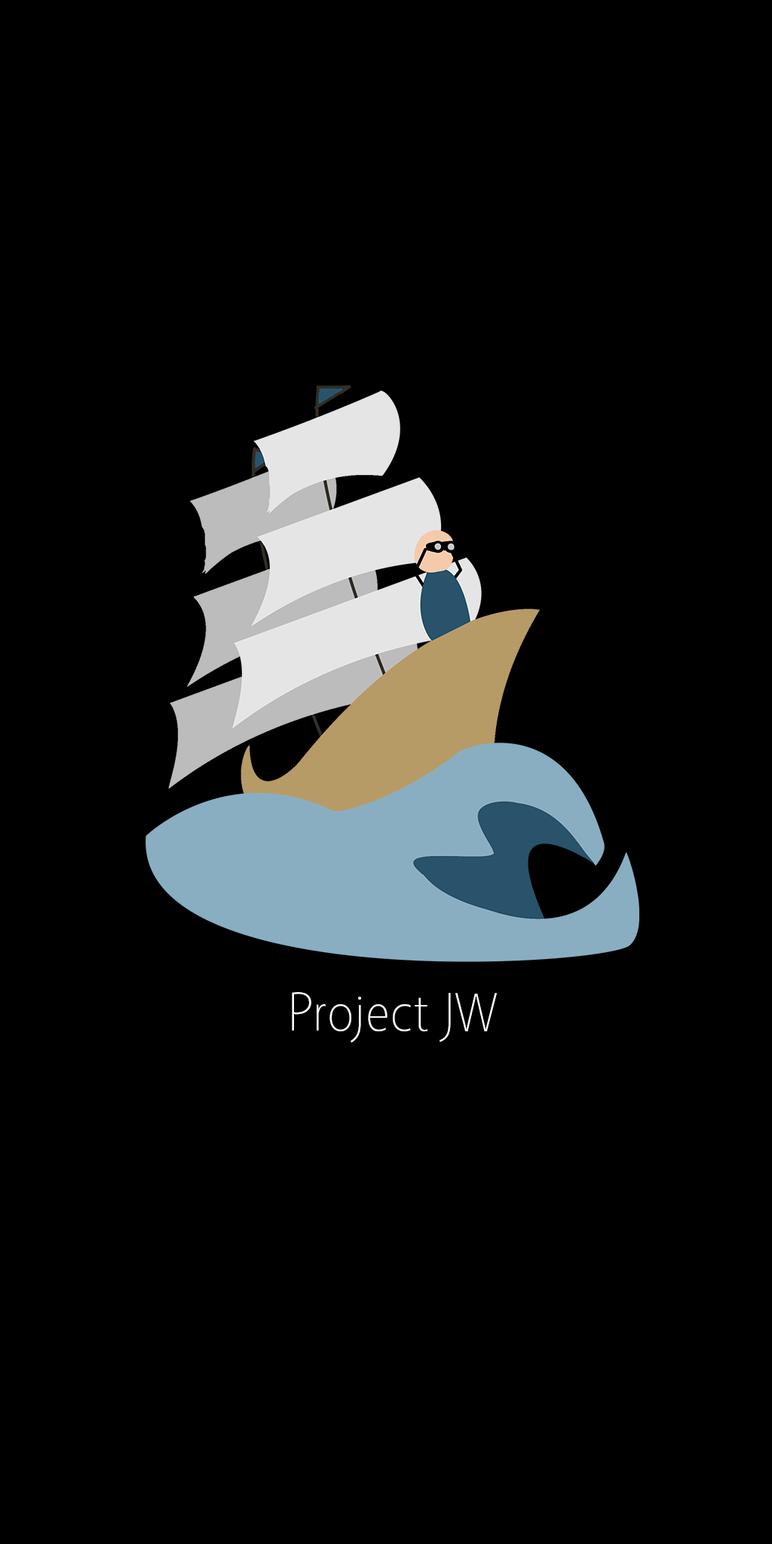
<style>
.page{position:relative;width:772px;height:1544px;background:#000000}
.page>*{position:absolute;margin:0}
.t1{font:54.3px "Vegur-Light";color:#ffffff}
</style>
<div class="page">
<p class="t1" style="left:292px;top:992px;width:205px;height:51px">Project JW</p>
</div>
